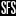
<style>
.page{position:relative;width:16px;height:16px;background:#000000}
.page>*{position:absolute;margin:0}
.t1{font:18.7px "SFMoviePosterCondensed";color:#ffffff;font-weight:bold;scale:1.55 1}
</style>
<div class="page">
<p class="t1" style="left:1px;top:1px;width:15px;height:13px">SFS</p>
</div>
